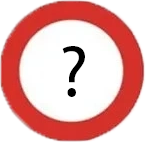
<style>
.page{position:relative;width:146px;height:142px;background:#ffffff}
.page>*{position:absolute;margin:0}
.t1{font:72px "MyriadPro-Regular";color:#000000}
</style>
<div class="page">
<p class="t1" style="left:62px;top:46px;width:23px;height:51px">?</p>
</div>
